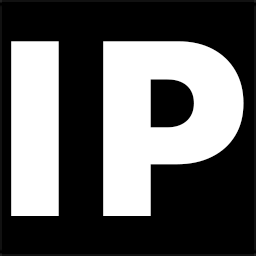
<style>
.page{position:relative;width:256px;height:256px;background:#000000}
.page>*{position:absolute;margin:0}
.t1{font:240px "InterVariable-Black";letter-spacing:0.075em;color:#ffffff;text-transform:uppercase;font-weight:bold}
</style>
<div class="page">
<p class="t1" style="left:11px;top:41px;width:233px;height:175px">IP</p>
</div>
